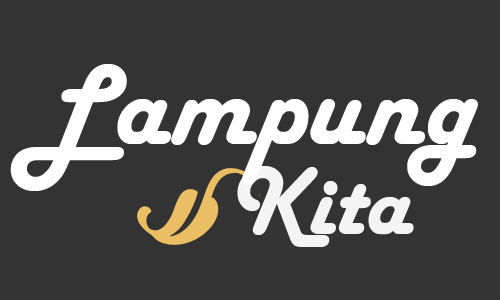
<style>
.page{position:relative;width:500px;height:300px;background:#333333}
.page>*{position:absolute;margin:0}
.t1{font:118.8px "HarlowSolid";color:#ffffff}
.t2{font:100.3px "HarlowSolid";color:#f4f4f4}
</style>
<div class="page">
<p class="t1" style="left:10px;top:64px;width:468px;height:127px">Lampung</p>
<p class="t2" style="left:237px;top:166px;width:177px;height:81px">Kita</p>
</div>
